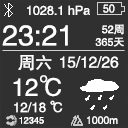
<style>
.page{position:relative;width:128px;height:128px;background:#303030}
.page>*{position:absolute;margin:0}
.t1{font:12.6px "FZHTJW--GB1-0";color:#ffffff}
.t2{font:11.5px "FZHTJW--GB1-0";color:#ffffff;scale:0.93 1}
.t3{font:28.5px "FZHTJW--GB1-0";color:#ffffff}
.t4{font:10.8px "FZHTJW--GB1-0";color:#ffffff}
.t5{font:17.2px "FZHTJW--GB1-0";color:#ffffff}
.t6{font:15.4px "FZHTJW--GB1-0";color:#ffffff}
.t7{font:24.2px "FZHTJW--GB1-0";color:#ffffff}
.t8{font:13.3px "FZHTJW--GB1-0";color:#ffffff}
.t9{font:9.2px "FZHTJW--GB1-0";color:#ffffff}
.t10{font:10.5px "FZHTJW--GB1-0";color:#ffffff}
</style>
<div class="page">
<p class="t1" style="left:27px;top:5px;width:63px;height:10px">1028.1 hPa</p>
<p class="t2" style="left:103px;top:4px;width:12px;height:9px">50</p>
<p class="t3" style="left:2px;top:25px;width:66px;height:21px">23:21</p>
<p class="t4" style="left:102px;top:24px;width:22px;height:11px">52周</p>
<p class="t4" style="left:95px;top:37px;width:29px;height:10px">365天</p>
<p class="t5" style="left:18px;top:55px;width:34px;height:16px">周六</p>
<p class="t6" style="left:60px;top:56px;width:59px;height:12px">15/12/26</p>
<p class="t7" style="left:13px;top:75px;width:48px;height:22px">12℃</p>
<p class="t8" style="left:14px;top:100px;width:49px;height:13px">12/18 ℃</p>
<p class="t9" style="left:19px;top:117px;width:25px;height:7px">12345</p>
<p class="t10" style="left:87px;top:116px;width:31px;height:8px">1000m</p>
</div>
